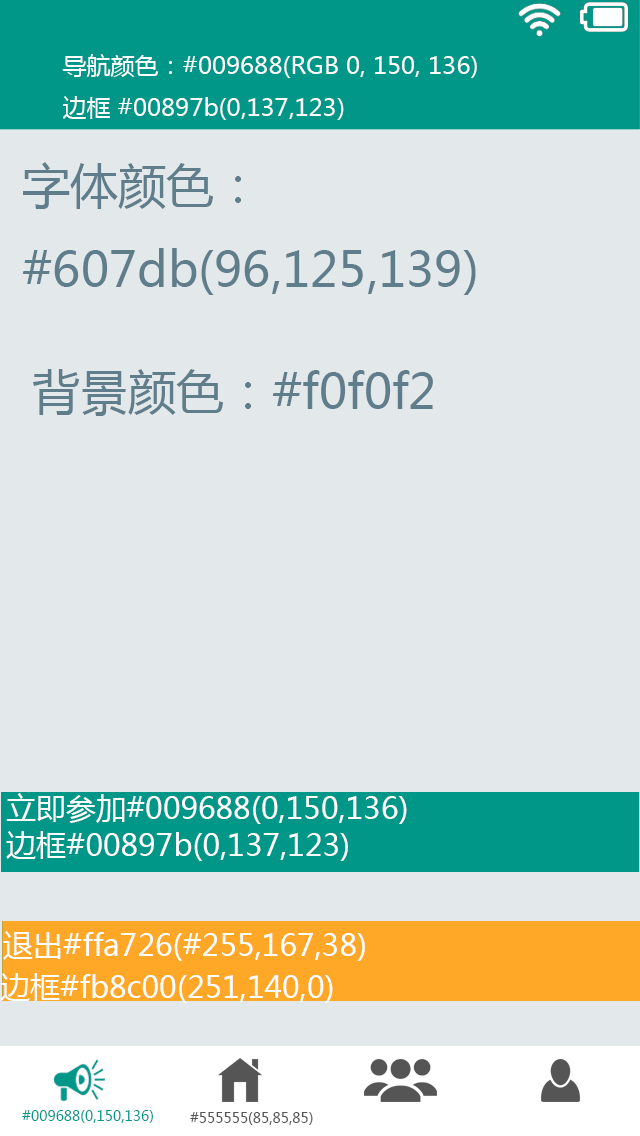
<style>
.page{position:relative;width:640px;height:1136px;background:#e3e8ea}
.page>*{position:absolute;margin:0}
.t1{font:24px "MicrosoftYaHei";color:#ffffff}
.t2{font:48px "MicrosoftYaHei";color:#607d8b}
.t3{font:30px "MicrosoftYaHei";color:#ffffff}
.t4{font:14px "MicrosoftYaHei";color:#009688}
.t5{font:14px "MicrosoftYaHei";color:#555555}
</style>
<div class="page">
<p class="t1" style="left:62px;top:54px;width:415px;height:66px">导航颜色：#009688(RGB 0, 150, 136)<br>边框 #00897b(0,137,123)</p>
<p class="t2" style="left:22px;top:162px;width:454px;height:133px">字体颜色：<br>#607db(96,125,139)</p>
<p class="t2" style="left:33px;top:369px;width:400px;height:47px">背景颜色：#f0f0f2</p>
<p class="t3" style="left:6px;top:793px;width:401px;height:31px">立即参加#009688(0,150,136)</p>
<p class="t3" style="left:6px;top:831px;width:342px;height:30px">边框#00897b(0,137,123)</p>
<p class="t3" style="left:3px;top:931px;width:362px;height:30px">退出#ffa726(#255,167,38)</p>
<p class="t3" style="left:0px;top:973px;width:333px;height:30px">边框#fb8c00(251,140,0)</p>
<p class="t4" style="left:22px;top:1110px;width:131px;height:13px">#009688(0,150,136)</p>
<p class="t5" style="left:190px;top:1112px;width:123px;height:13px">#555555(85,85,85)</p>
</div>
